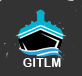
<style>
.page{position:relative;width:82px;height:76px;background:#333333}
.page>*{position:absolute;margin:0}
.t1{font:12.3px "ArialRoundedMTBold";color:#ffffff}
</style>
<div class="page">
<p class="t1" style="left:23px;top:58px;width:38px;height:9px">GITLM</p>
</div>
